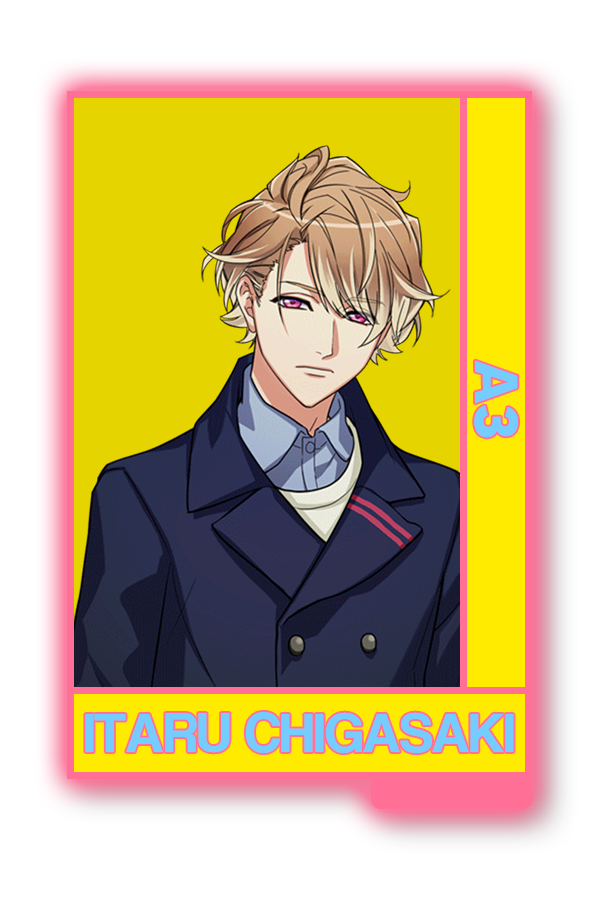
<style>
.page{position:relative;width:600px;height:900px;background:#ffffff}
.page>*{position:absolute;margin:0}
.t1{font:60.5px "MADETOMMY-Bold";color:#74ccff}
.t2{font:57.7px "CoolveticaRg-Regular";color:#74ccff}
</style>
<div class="page">
<p class="t1" style="left:474px;top:360px;width:44px;height:78px;rotate:90deg">A3</p>
<p class="t2" style="left:85px;top:712px;width:429px;height:41px">ITARU CHIGASAKI</p>
</div>
